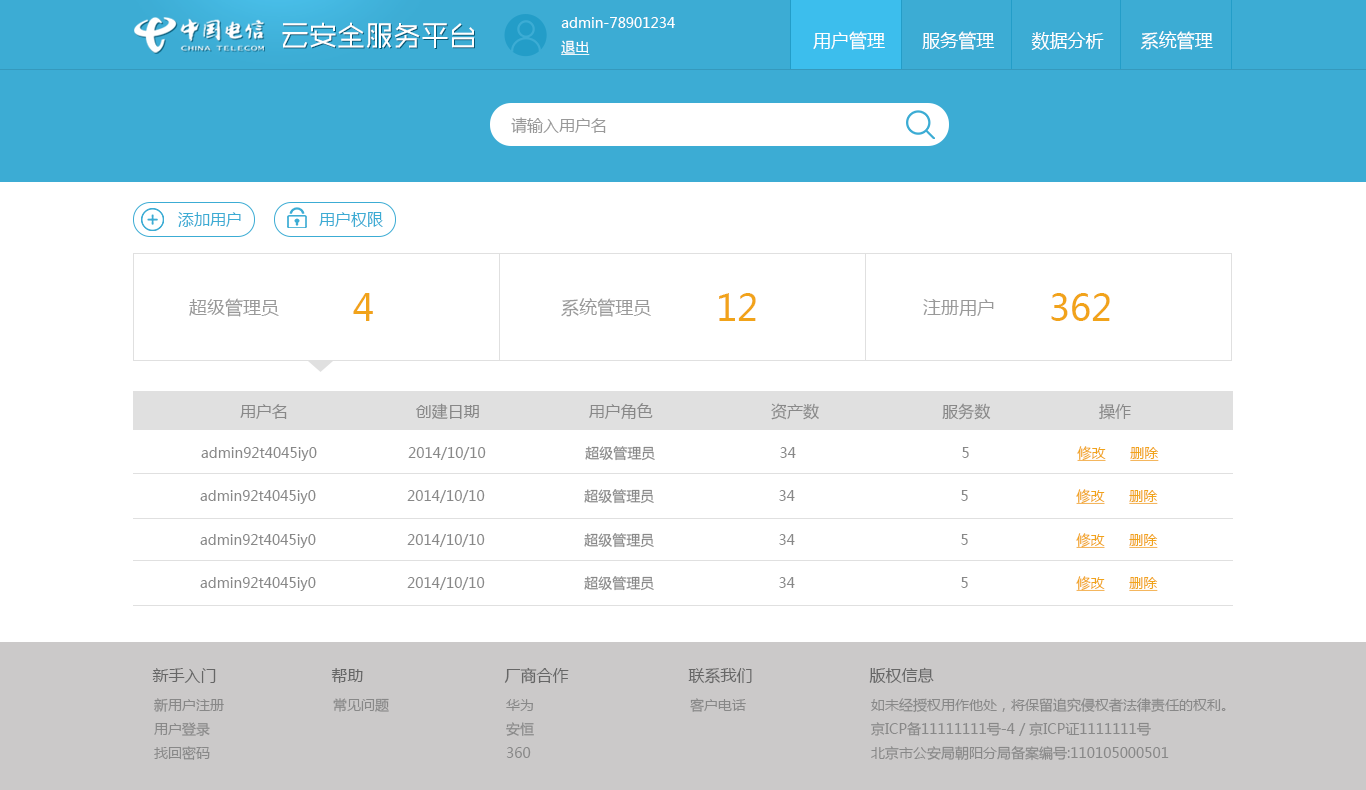
<style>
.page{position:relative;width:1366px;height:790px;background:#ffffff}
.page>*{position:absolute;margin:0}
.t1{font:14px/24px "MicrosoftYaHei";color:#ffffff}
.t2{font:14px/24px "MicrosoftYaHei";color:#ffffff;text-decoration:underline}
.t3{font:28px "MFShangHei_Noncommercial-Regular";color:#ffffff}
.t4{font:18px "MicrosoftYaHei";color:#ffffff}
.t5{font:16px "MicrosoftYaHei";color:#999999}
.t6{font:16px "MicrosoftYaHei";color:#3cacd4}
.t7{font:36px "MicrosoftYaHei";color:#f1a31a}
.t8{font:18px "MicrosoftYaHei";color:#999999}
.t9{font:16px "MicrosoftYaHei";color:#888888}
.t10{font:14px "MicrosoftYaHei";color:#888888}
.t11{font:14px "MicrosoftYaHei";color:#f1a31a;text-decoration:underline}
.t12{font:16px "MicrosoftYaHei";color:#666666}
.t13{font:14px/24px "MicrosoftYaHei";color:#888888}
</style>
<div class="page">
<p class="t1" style="left:561px;top:17px;width:114px;height:38px">admin-78901234<br><span class="t2">退出</span></p>
<p class="t3" style="left:282px;top:22px;width:192px;height:26px">云安全服务平台</p>
<p class="t4" style="left:813px;top:31px;width:400px;height:19px">用户管理       服务管理       数据分析       系统管理</p>
<p class="t5" style="left:511px;top:117px;width:95px;height:17px">请输入用户名</p>
<p class="t6" style="left:178px;top:212px;width:63px;height:15px">添加用户</p>
<p class="t6" style="left:319px;top:212px;width:64px;height:15px">用户权限</p>
<p class="t7" style="left:353px;top:293px;width:20px;height:28px">4</p>
<p class="t7" style="left:719px;top:293px;width:37px;height:28px">12</p>
<p class="t7" style="left:1051px;top:293px;width:59px;height:28px">362</p>
<p class="t8" style="left:189px;top:298px;width:805px;height:19px">超级管理员                                                     系统管理员                                                   注册用户</p>
<p class="t9" style="left:240px;top:403px;width:891px;height:17px">用户名                           创建日期                       用户角色                         资产数                          服务数                       操作</p>
<p class="t10" style="left:201px;top:446px;width:958px;height:15px">admin92t4045iy0                      2014/10/10                        超级管理员                              34                                        5                          <span class="t11">修改      删除</span></p>
<p class="t10" style="left:200px;top:489px;width:958px;height:15px">admin92t4045iy0                      2014/10/10                        超级管理员                              34                                        5                          <span class="t11">修改      删除</span></p>
<p class="t10" style="left:200px;top:533px;width:958px;height:15px">admin92t4045iy0                      2014/10/10                        超级管理员                              34                                        5                          <span class="t11">修改      删除</span></p>
<p class="t10" style="left:200px;top:576px;width:958px;height:15px">admin92t4045iy0                      2014/10/10                        超级管理员                              34                                        5                          <span class="t11">修改      删除</span></p>
<p class="t12" style="left:152px;top:668px;width:64px;height:15px">新手入门</p>
<p class="t12" style="left:331px;top:668px;width:32px;height:15px">帮助</p>
<p class="t12" style="left:504px;top:667px;width:65px;height:17px">厂商合作</p>
<p class="t12" style="left:688px;top:668px;width:64px;height:16px">联系我们</p>
<p class="t12" style="left:869px;top:667px;width:65px;height:16px">版权信息</p>
<p class="t13" style="left:154px;top:698px;width:70px;height:62px">新用户注册<br>用户登录<br>找回密码</p>
<p class="t10" style="left:333px;top:698px;width:56px;height:14px">常见问题</p>
<p class="t13" style="left:506px;top:699px;width:28px;height:59px">华为<br>安恒<br>360</p>
<p class="t10" style="left:690px;top:698px;width:56px;height:14px">客户电话</p>
<p class="t13" style="left:871px;top:698px;width:355px;height:63px">如未经授权用作他处，将保留追究侵权者法律责任的权利。<br>京ICP备11111111号-4 / 京ICP证1111111号<br>北京市公安局朝阳分局备案编号:110105000501</p>
</div>
